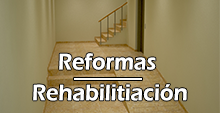
<style>
.page{position:relative;width:220px;height:113px}
.page>*{position:absolute;margin:0}
.t1{font:23.1px/15.4px "ErasITC-Demi";color:#ffffff;scale:0.96 1}
</style>
<div class="page">
<p class="t1" style="left:33px;top:53px;width:154px;height:48px;text-align:center">Reformas<br> <br> Rehabilitiación</p>
</div>
